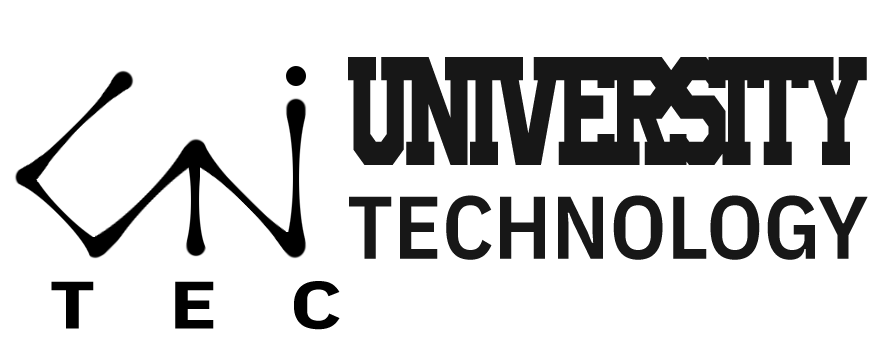
<style>
.page{position:relative;width:884px;height:356px;background:#ffffff}
.page>*{position:absolute;margin:0}
.t1{font:108px "UniversityRegular";letter-spacing:-0.108em;color:#171717;text-transform:uppercase;scale:0.72 1}
.t2{font:89px "IBMPlexSansCond-SemiBold";color:#171717;text-transform:uppercase}
.t3{font:67px "IBMPlexSansCond-Bold";letter-spacing:0.86em;color:#000000;text-transform:uppercase;scale:1.31 1}
</style>
<div class="page">
<p class="t1" style="left:348px;top:57px;width:519px;height:108px">UNIVERSITY</p>
<p class="t2" style="left:349px;top:195px;width:519px;height:65px">TECHNOLOGY</p>
<p class="t3" style="left:51px;top:281px;width:289px;height:49px">TEC</p>
</div>
